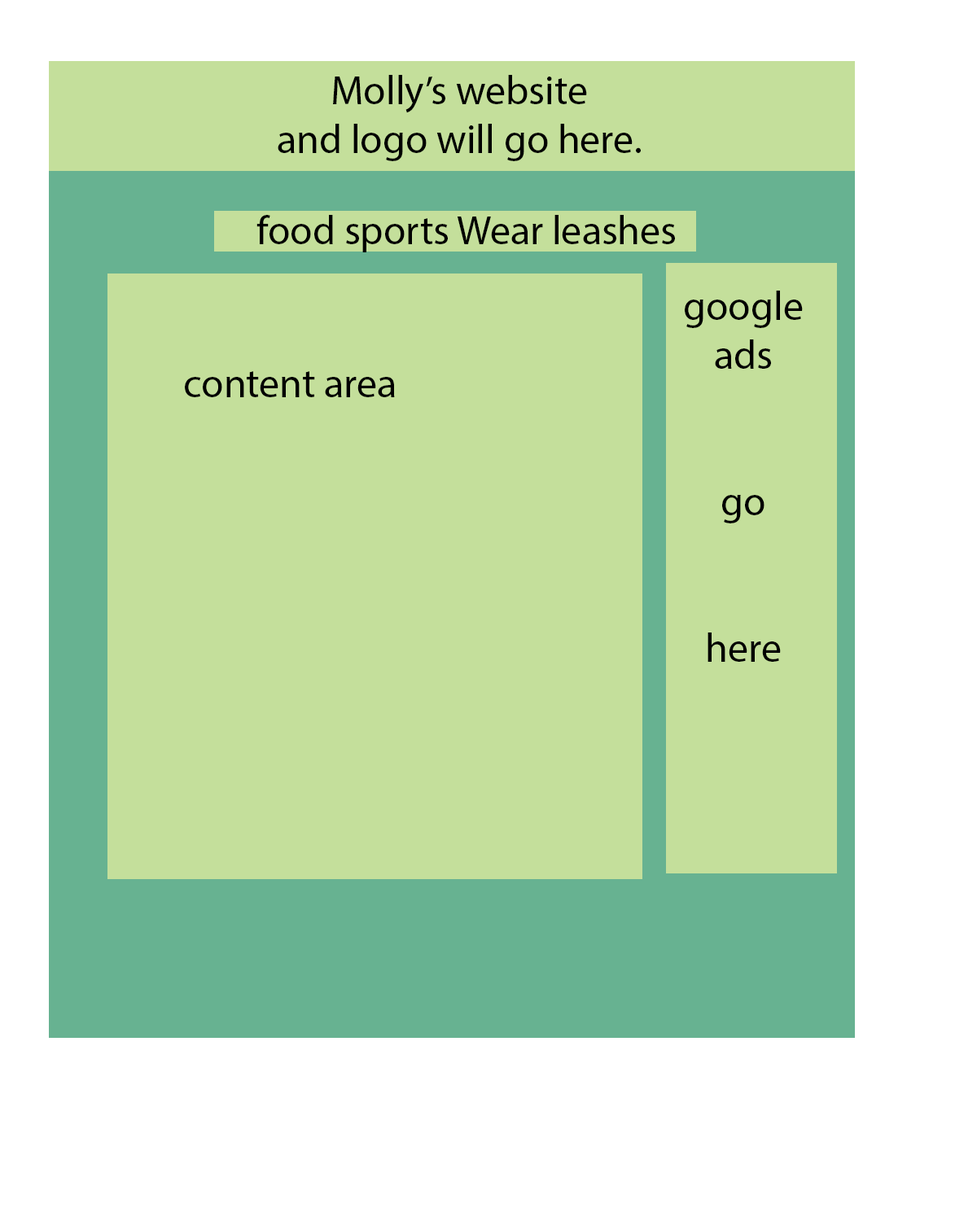
<style>
.page{position:relative;width:977px;height:1221px;background:#c4df9b}
.page>*{position:absolute;margin:0}
.t1{font:9.8px "MyriadPro-Regular";color:#000000}
</style>
<div class="page">
<p class="t1" style="left:278px;top:75px;width:363px;height:86px;text-align:center">Molly’s website<br>and logo will go here.</p>
<p class="t1" style="left:256px;top:215px;width:419px;height:37px;text-align:center">food sports Wear leashes</p>
<p class="t1" style="left:685px;top:291px;width:118px;height:371px;text-align:center">google ads  <br><br><br>go <br><br><br>here</p>
<p class="t1" style="left:185px;top:371px;width:210px;height:26px">content area</p>
</div>
